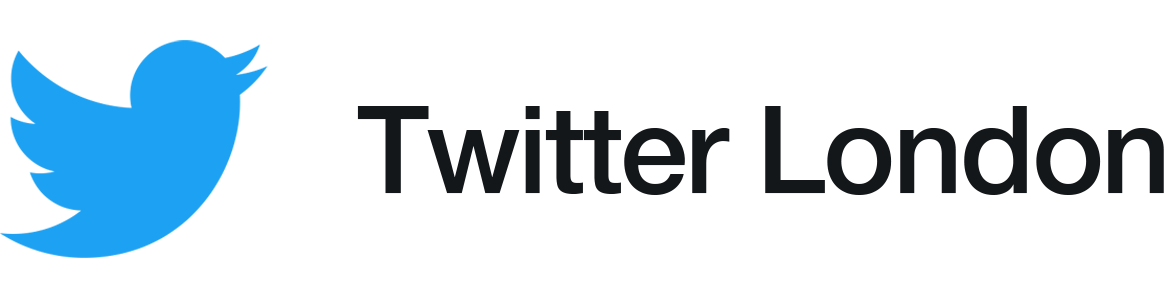
<style>
.page{position:relative;width:1168px;height:298px;background:#ffffff}
.page>*{position:absolute;margin:0}
.t1{font:122.3px "HelveticaNeue-Medium";letter-spacing:-0.025em;color:#14171a}
</style>
<div class="page">
<p class="t1" style="left:357px;top:106px;width:807px;height:89px">Twitter London</p>
</div>
